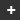
<style>
.page{position:relative;width:20px;height:20px;background:#333333}
.page>*{position:absolute;margin:0}
.t1{font:15px "Helvetica-Bold";letter-spacing:-0.04em;color:#ffffff}
</style>
<div class="page">
<p class="t1" style="left:7px;top:6px;width:9px;height:8px">+</p>
</div>
